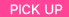
<style>
.page{position:relative;width:69px;height:17px;background:#ff4498}
.page>*{position:absolute;margin:0}
.t1{font:11.9px "HiraKakuPro-W6";color:#ffffff}
</style>
<div class="page">
<p class="t1" style="left:10px;top:4px;width:53px;height:11px">PICK UP</p>
</div>
